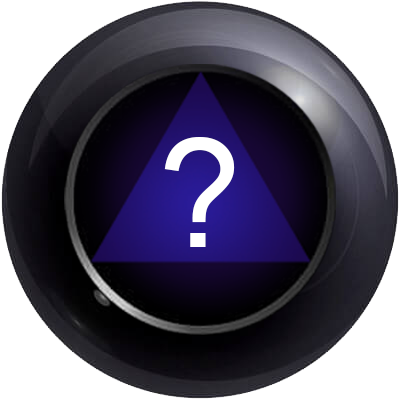
<style>
.page{position:relative;width:400px;height:400px;background:#ffffff}
.page>*{position:absolute;margin:0}
.t1{font:150px "ArialMT";color:#ffffff;text-transform:uppercase}
</style>
<div class="page">
<p class="t1" style="left:164px;top:137px;width:71px;height:110px">?</p>
</div>
